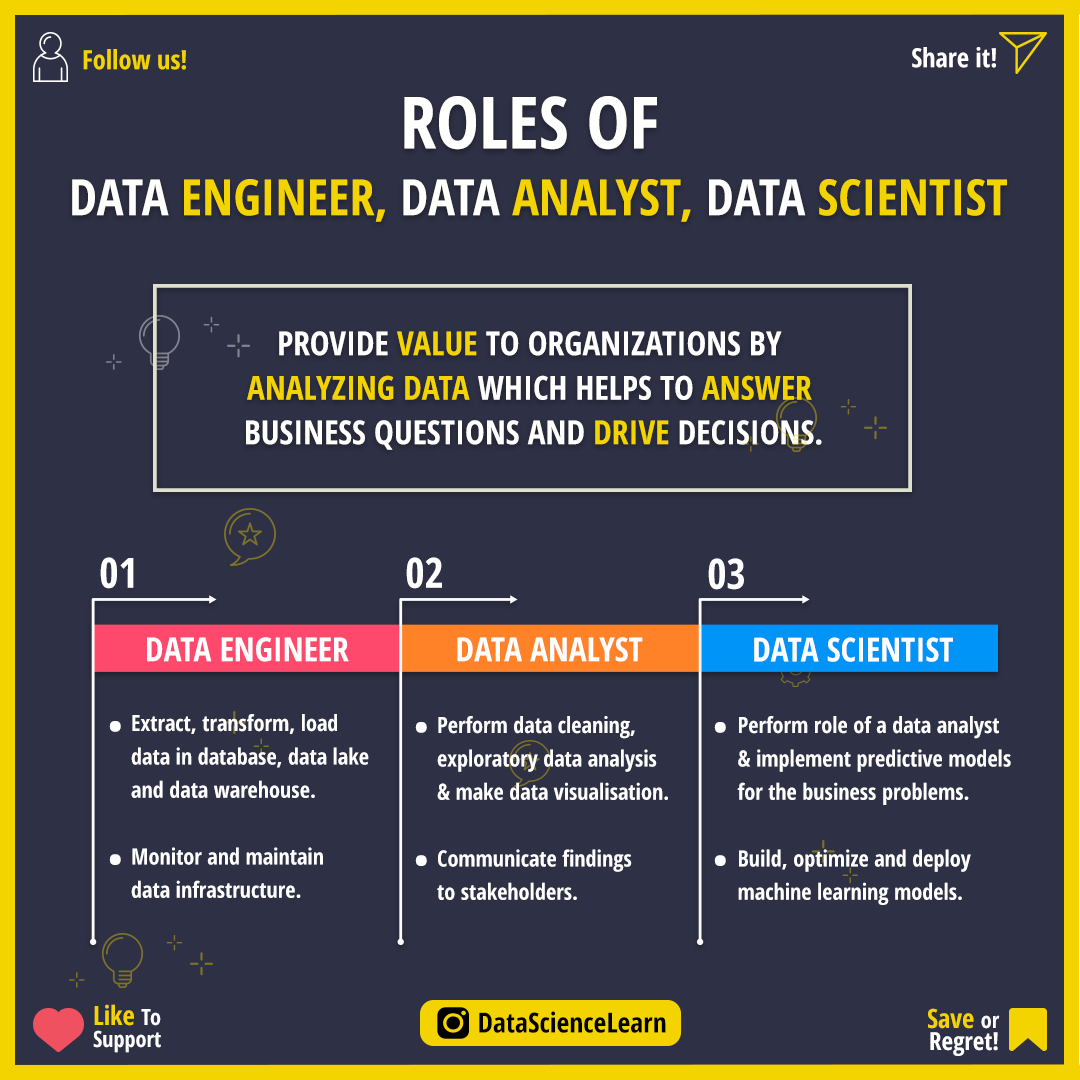
<style>
.page{position:relative;width:1080px;height:1080px;background:#2e3045}
.page>*{position:absolute;margin:0}
.t1{font:26.4px "OpenSans-CondensedBold";color:#f3d400}
.t2{font:26.4px "OpenSans-CondensedBold";color:#ffffff}
.t3{font:50px/66.7px "OpenSans-CondensedBold";color:#f3d400}
.t4{font:72.2px/66.7px "OpenSans-CondensedBold";color:#fffffe}
.t5{font:50px/66.7px "OpenSans-CondensedBold";color:#fffffe}
.t6{font:50px/66.7px "OpenSans-CondensedBold";color:#fefefe}
.t7{font:33.3px/44.4px "OpenSans-CondensedBold";color:#ffffff}
.t8{font:33.3px/44.4px "OpenSans-CondensedBold";color:#f3d400}
.t9{font:41.7px "OpenSans-CondensedBold";color:#ffffff}
.t10{font:33.3px "OpenSans-CondensedBold";color:#ffffff}
.t11{font:66.7px/33.3px "OpenSans-CondensedBold";color:#ffffff}
.t12{font:22.2px/33.3px "OpenSans-CondensedBold";color:#ffffff}
.t13{font:22.2px/22.2px "OpenSans-CondensedBold";color:#ffffff}
.t14{font:26.4px/22.2px "OpenSans-CondensedBold";color:#f3d400}
.t15{font:27.8px "OpenSans-CondensedBold";color:#000000}
.t16{font:25px/22.2px "OpenSans-CondensedBold";color:#ffffff}
</style>
<div class="page">
<p class="t1" style="left:83px;top:49px;width:103px;height:21px">Follow us!</p>
<p class="t2" style="left:912px;top:47px;width:84px;height:21px">Share it!</p>
<p class="t3" style="left:72px;top:96px;width:935px;height:126px;text-align:center"><span class="t4">ROLES OF <br></span><span class="t5">DATA </span>ENGINEER, <span class="t5">DATA</span> ANALYST, <span class="t6">DATA</span> SCIENTIST</p>
<p class="t7" style="left:246px;top:331px;width:576px;height:119px;text-align:center">PROVIDE <span class="t8">VALUE </span>TO ORGANIZATIONS BY <br><span class="t8">ANALYZING DATA </span>WHICH HELPS TO <span class="t8">ANSWER <br></span>BUSINESS QUESTIONS AND <span class="t8">DRIVE </span>DECISIONS.</p>
<p class="t9" style="left:100px;top:557px;width:34px;height:32px">01</p>
<p class="t9" style="left:406px;top:557px;width:36px;height:32px">02</p>
<p class="t9" style="left:708px;top:558px;width:36px;height:32px">03</p>
<p class="t10" style="left:147px;top:637px;width:202px;height:25px">DATA ENGINEER</p>
<p class="t10" style="left:457px;top:637px;width:186px;height:25px">DATA ANALYST</p>
<p class="t10" style="left:754px;top:637px;width:199px;height:25px">DATA SCIENTIST</p>
<p class="t11" style="left:109px;top:721px;width:12px;height:144px">.<br><br><br><br>.</p>
<p class="t12" style="left:131px;top:714px;width:238px;height:184px">Extract, transform, load<br>data in database, data lake <br>and data warehouse.<br><br>Monitor and maintain <br>data infrastructure.</p>
<p class="t11" style="left:415px;top:722px;width:12px;height:144px">.<br><br><br><br>.</p>
<p class="t12" style="left:437px;top:716px;width:231px;height:184px">Perform data cleaning,<br>exploratory data analysis<br>&amp; make data visualisation.<br><br>Communicate findings <br>to stakeholders.</p>
<p class="t11" style="left:714px;top:722px;width:12px;height:144px">.<br><br><br><br>.</p>
<p class="t12" style="left:737px;top:716px;width:274px;height:189px">Perform role of a data analyst<br>&amp; implement predictive models<br>for the business problems.<br><br>Build, optimize and deploy <br>machine learning models.</p>
<p class="t13" style="left:93px;top:1004px;width:68px;height:49px"><span class="t14">Like </span>To<br>Support</p>
<p class="t15" style="left:479px;top:1011px;width:187px;height:22px">DataScienceLearn</p>
<p class="t16" style="left:928px;top:1008px;width:72px;height:48px;text-align:right"><span class="t14">Save </span><span class="t13">or<br></span>Regret!</p>
</div>
